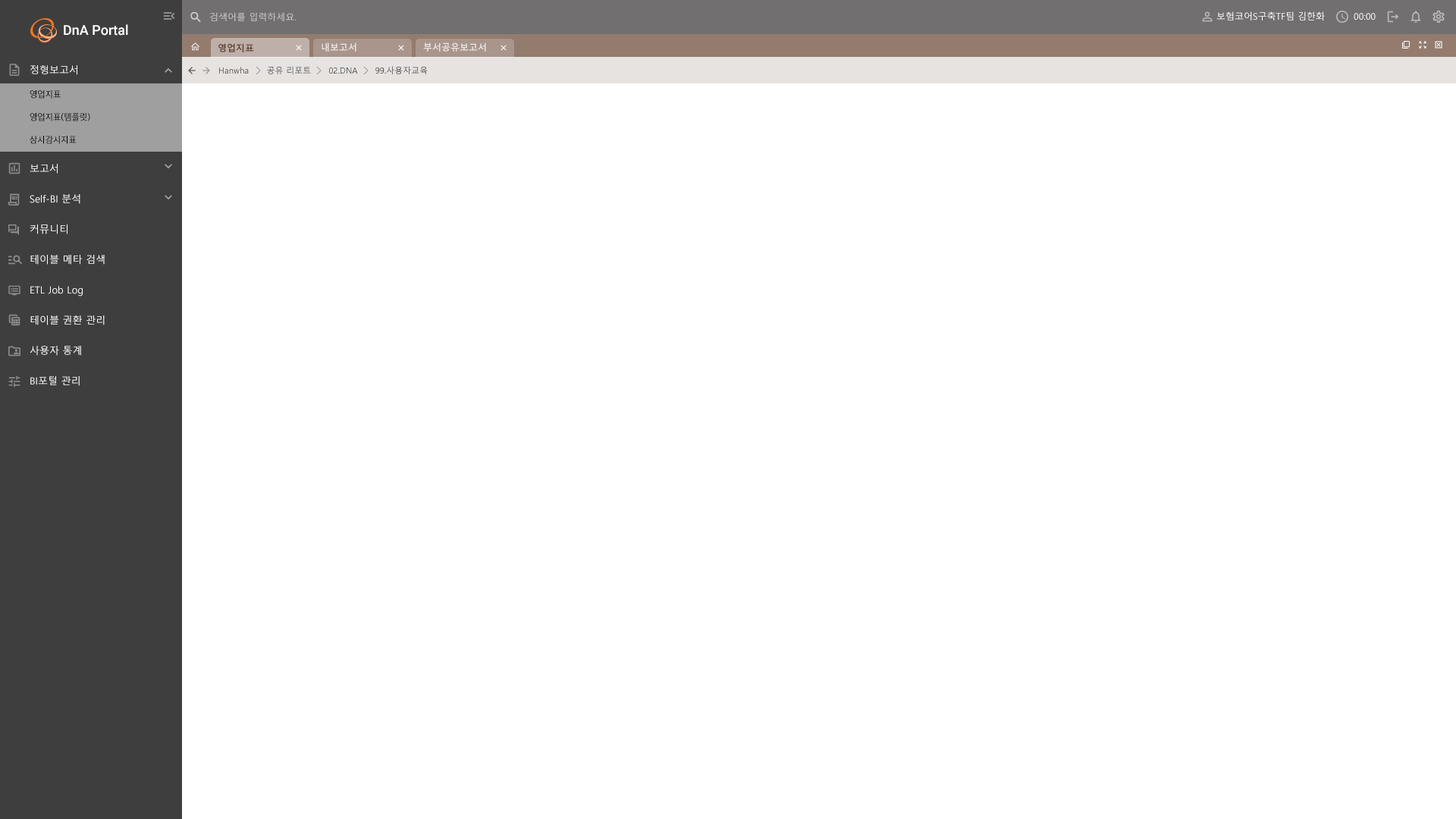
<style>
.page{position:relative;width:1456px;height:819px;background:#ffffff}
.page>*{position:absolute;margin:0}
.t1{font:9.1px "MalgunGothic";color:#cccccc}
.t2{font:9.1px "MalgunGothic";color:#ffffff}
.t3{font:13.6px "Roboto-Medium";color:#ffffff}
.t4{font:9.1px "MalgunGothicBold";color:#5e4030}
.t5{font:9.1px "MalgunGothicBold";color:#e9e4e2}
.t6{font:9.9px/30.3px "MalgunGothic";color:#ffffff}
.t7{font:9.9px/36.4px "MalgunGothic";color:#ffffff}
.t8{font:9.9px/98.6px "MalgunGothic";color:#ffffff}
.t9{font:8.3px "MalgunGothic";color:#353535}
.t10{font:9.1px/22.7px "HyundaiSansTextKRRegular";color:#000000}
</style>
<div class="page">
<p class="t1" style="left:210px;top:12px;width:87px;height:9px">검색어를 입력하세요.</p>
<p class="t2" style="left:1216px;top:11px;width:160px;height:9px">보험코어S구축TF팀 김한화         00:00</p>
<p class="t3" style="left:64px;top:24px;width:64px;height:12px">DnA Portal</p>
<p class="t4" style="left:218px;top:43px;width:36px;height:9px">영업지표</p>
<p class="t5" style="left:322px;top:42px;width:34px;height:10px">내보고서</p>
<p class="t5" style="left:423px;top:42px;width:63px;height:10px">부서공유보고서</p>
<p class="t6" style="left:30px;top:65px;width:75px;height:321px"><span class="t7">정형보고</span><span class="t8">서<br>보</span><span class="t7">고</span>서<br>Self-BI 분석<br>커뮤니티<br>테이블 메타 검색<br>ETL Job Log<br>테이블 권환 관리<br>사용자 통계<br>BI포털 관리</p>
<p class="t9" style="left:219px;top:66px;width:209px;height:8px">Hanwha      공유 리포트      02.DNA      99.사용자교육</p>
<p class="t10" style="left:30px;top:90px;width:60px;height:54px">영업지표<br>영업지표(템플릿)<br>상시감시지표</p>
</div>
